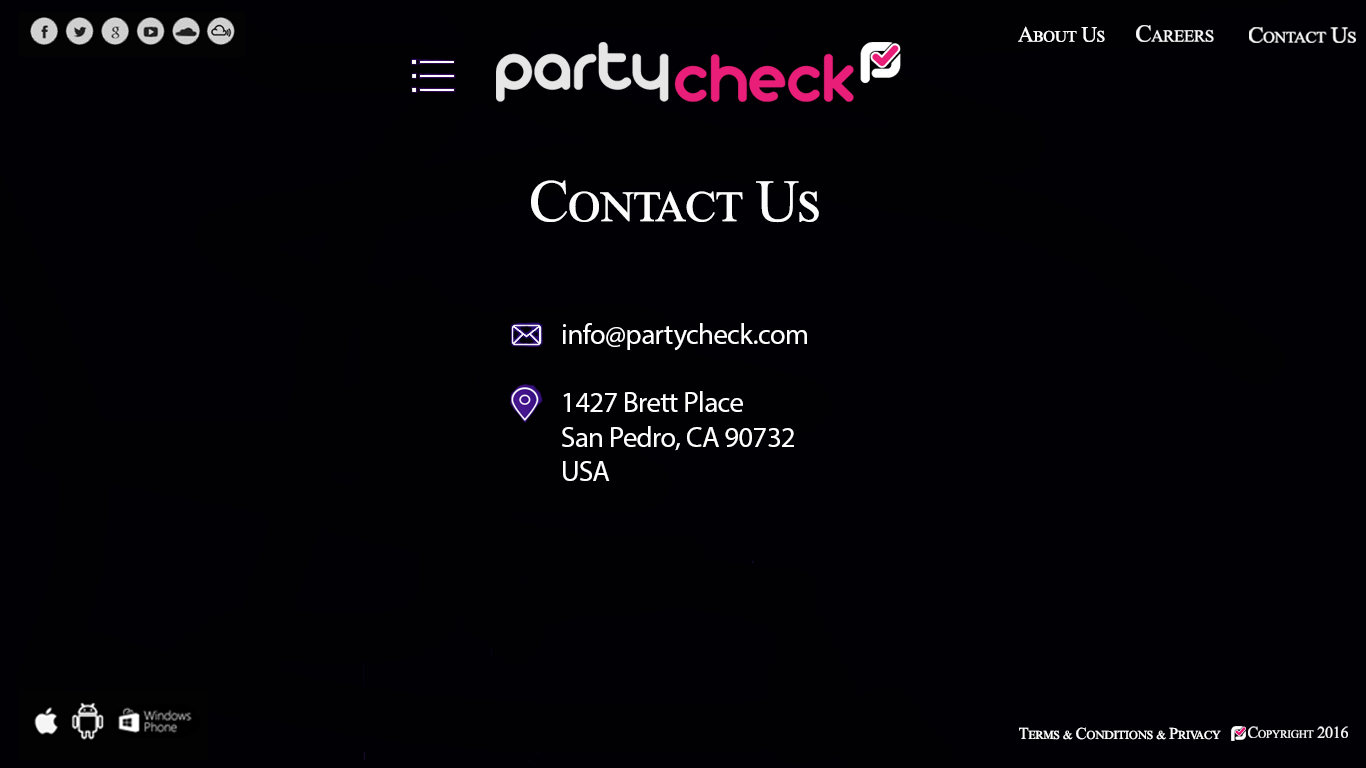
<style>
.page{position:relative;width:1366px;height:768px;background:#010004}
.page>*{position:absolute;margin:0}
.t1{font:21.9px "TimesNewRomanPSMT";letter-spacing:-0.025em;color:#fdfcfc;font-variant:small-caps}
.t2{font:24.3px "TimesNewRomanPSMT";letter-spacing:-0.025em;color:#fdfcfc;font-variant:small-caps}
.t3{font:22.2px "TimesNewRomanPSMT";letter-spacing:-0.025em;color:#fdfcfc;font-variant:small-caps;scale:1.05 1}
.t4{font:59.8px "TimesNewRomanPSMT";letter-spacing:-0.025em;color:#fdfcfc;font-variant:small-caps}
.t5{font:28.6px "MyriadPro-Regular";letter-spacing:-0.02em;color:#ffffff}
.t6{font:16.3px "TimesNewRomanPSMT";letter-spacing:-0.025em;color:#fdfcfc;font-variant:small-caps}
.t7{font:16.5px "TimesNewRomanPSMT";letter-spacing:-0.025em;color:#fdfcfc;font-variant:small-caps}
</style>
<div class="page">
<p class="t1" style="left:1018px;top:26px;width:87px;height:16px">About Us</p>
<p class="t2" style="left:1136px;top:25px;width:78px;height:17px">Careers</p>
<p class="t3" style="left:1249px;top:27px;width:107px;height:16px">Contact Us</p>
<p class="t4" style="left:531px;top:180px;width:288px;height:43px">Contact Us</p>
<p class="t5" style="left:562px;top:323px;width:245px;height:158px">info@partycheck.com<br><br>1427 Brett Place <br>San Pedro, CA 90732<br>USA</p>
<p class="t6" style="left:1248px;top:726px;width:100px;height:12px">Copyright 2016</p>
<p class="t7" style="left:1019px;top:727px;width:202px;height:13px">Terms &amp; Conditions &amp; Privacy</p>
</div>
